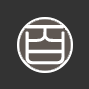
<style>
.page{position:relative;width:89px;height:89px;background:#333333}
.page>*{position:absolute;margin:0}
.t1{font:43.3px "¾­µä·±·½×­ Regular";color:#ffffff}
</style>
<div class="page">
<p class="t1" style="left:25px;top:25px;width:40px;height:40px">百</p>
</div>
